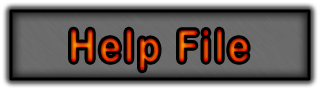
<style>
.page{position:relative;width:321px;height:91px}
.page>*{position:absolute;margin:0}
.t1{font:43.2px "ArialRoundedMTBold";letter-spacing:0.1em;scale:0.83 1}
</style>
<div class="page">
<p class="t1" style="left:71px;top:29px;width:177px;height:42px">Help File</p>
</div>
